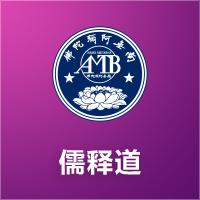
<style>
.page{position:relative;width:200px;height:200px}
.page>*{position:absolute;margin:0}
.t1{font:28px "FZLTCHK--GBK1-0";color:#ffffff}
</style>
<div class="page">
<p class="t1" style="left:59px;top:149px;width:82px;height:26px">儒释道</p>
</div>
